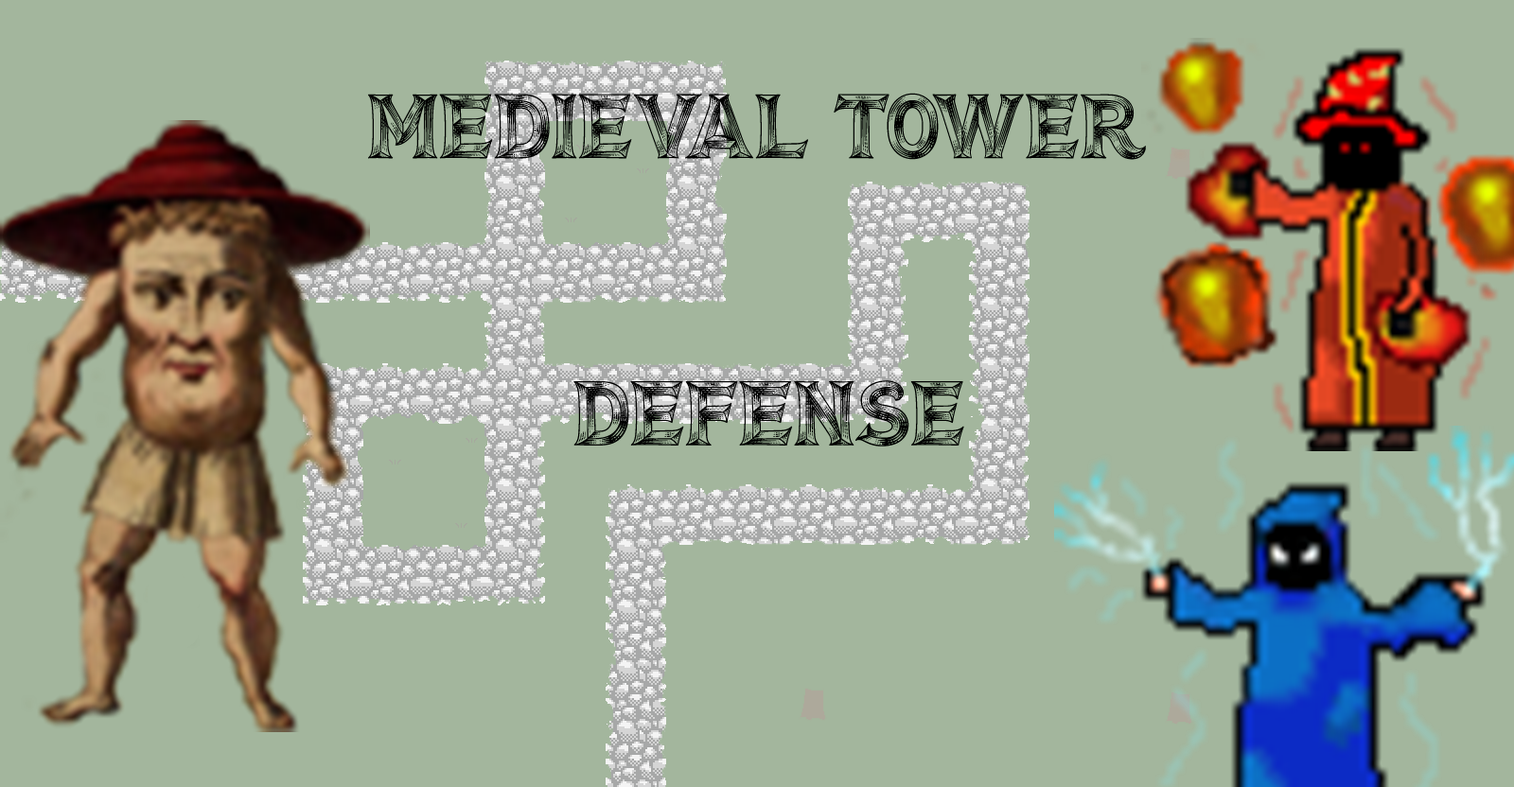
<style>
.page{position:relative;width:1514px;height:787px;background:#a3b69d}
.page>*{position:absolute;margin:0}
.t1{font:91.8px/287.2px "BiteHard";color:#000000;scale:1.03 1}
</style>
<div class="page">
<p class="t1" style="left:368px;top:93px;width:778px;height:354px;text-align:center">Medieval Tower <br>Defense</p>
</div>
